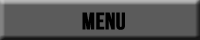
<style>
.page{position:relative;width:200px;height:40px;background:#5b5b5b}
.page>*{position:absolute;margin:0}
.t1{font:24px "BebasNeue";color:#000000;font-weight:bold}
</style>
<div class="page">
<p class="t1" style="left:82px;top:12px;width:43px;height:18px">MENU</p>
</div>
